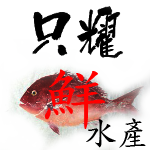
<style>
.page{position:relative;width:150px;height:150px;background:#ffffff}
.page>*{position:absolute;margin:0}
.t1{font:66.7px "DFKaiShu-SB-Estd-BF";color:#ff0000;scale:1.03 1}
.t2{font:34.2px "DFKaiShu-SB-Estd-BF";color:#000000;scale:0.94 1}
</style>
<div class="page">
<p class="t1" style="left:45px;top:69px;width:61px;height:60px">鮮</p>
<p class="t2" style="left:86px;top:118px;width:60px;height:30px">水產</p>
</div>
